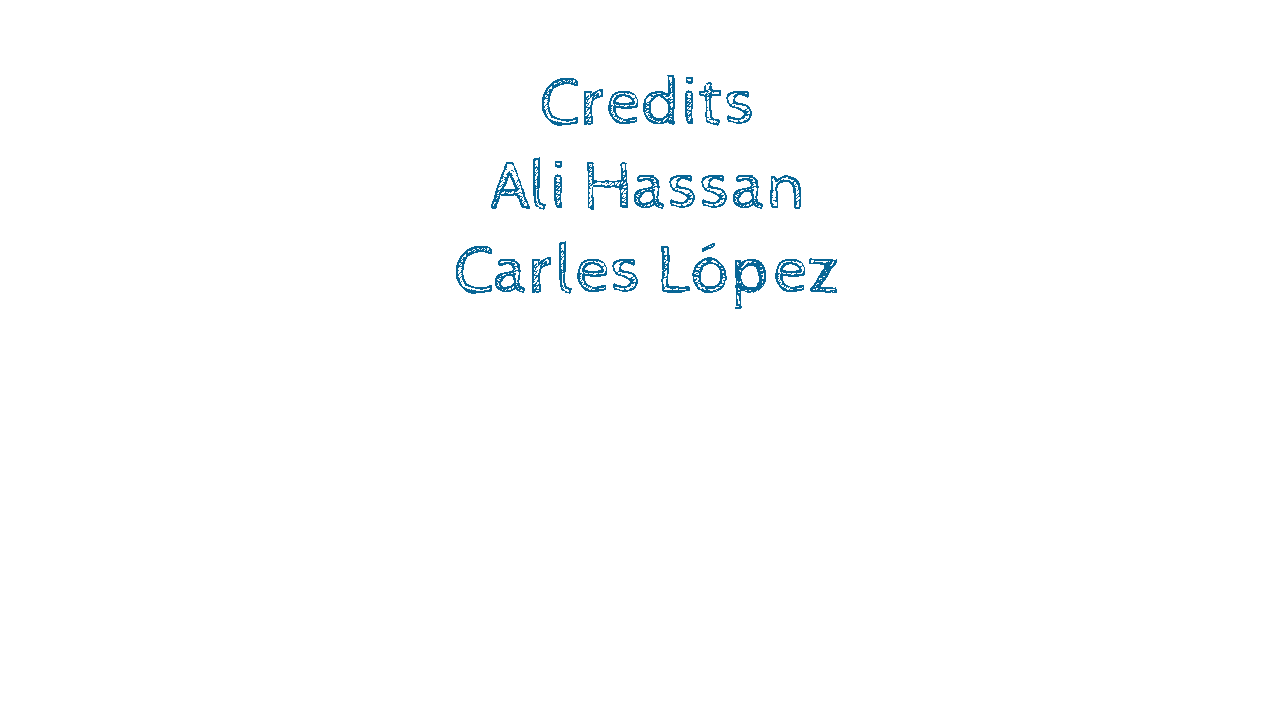
<style>
.page{position:relative;width:1280px;height:720px;background:#ffffff}
.page>*{position:absolute;margin:0}
.t1{font:70px "CabinSketch-Regular";color:#086696}
</style>
<div class="page">
<p class="t1" style="left:456px;top:75px;width:381px;height:234px;text-align:center">Credits<br>Ali Hassan<br>Carles López</p>
</div>
